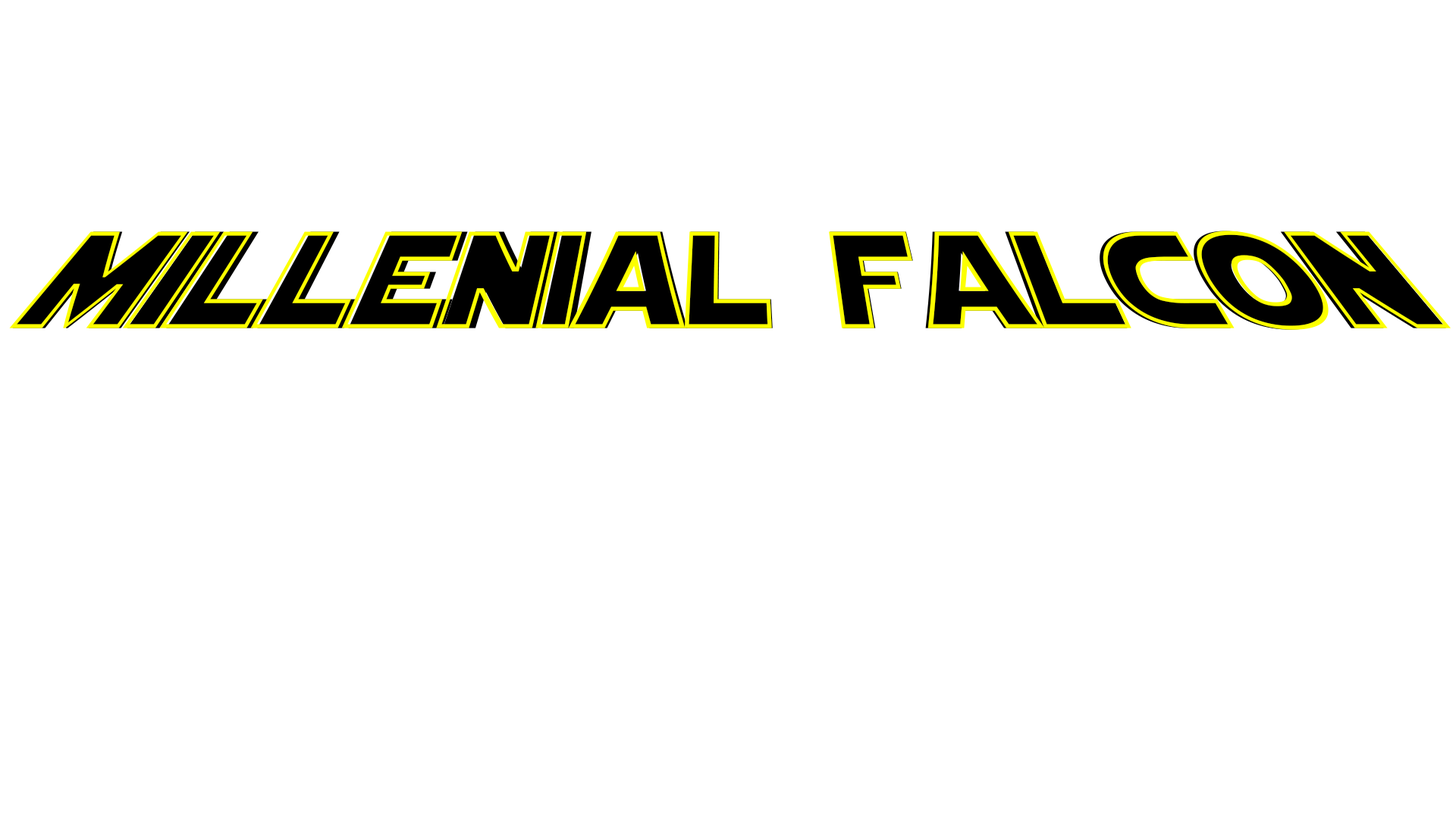
<style>
.page{position:relative;width:1456px;height:819px;background:#ffffff}
.page>*{position:absolute;margin:0}
.t1{font:136.5px "StarJediHollow";color:#fcff00}
.t2{font:136.5px "StarJedi";color:#000000}
</style>
<div class="page">
<p class="t1" style="left:9px;top:231px;width:1442px;height:99px">millenial falcon</p>
<p class="t2" style="left:12px;top:231px;width:1434px;height:99px">millenial falcon</p>
</div>
